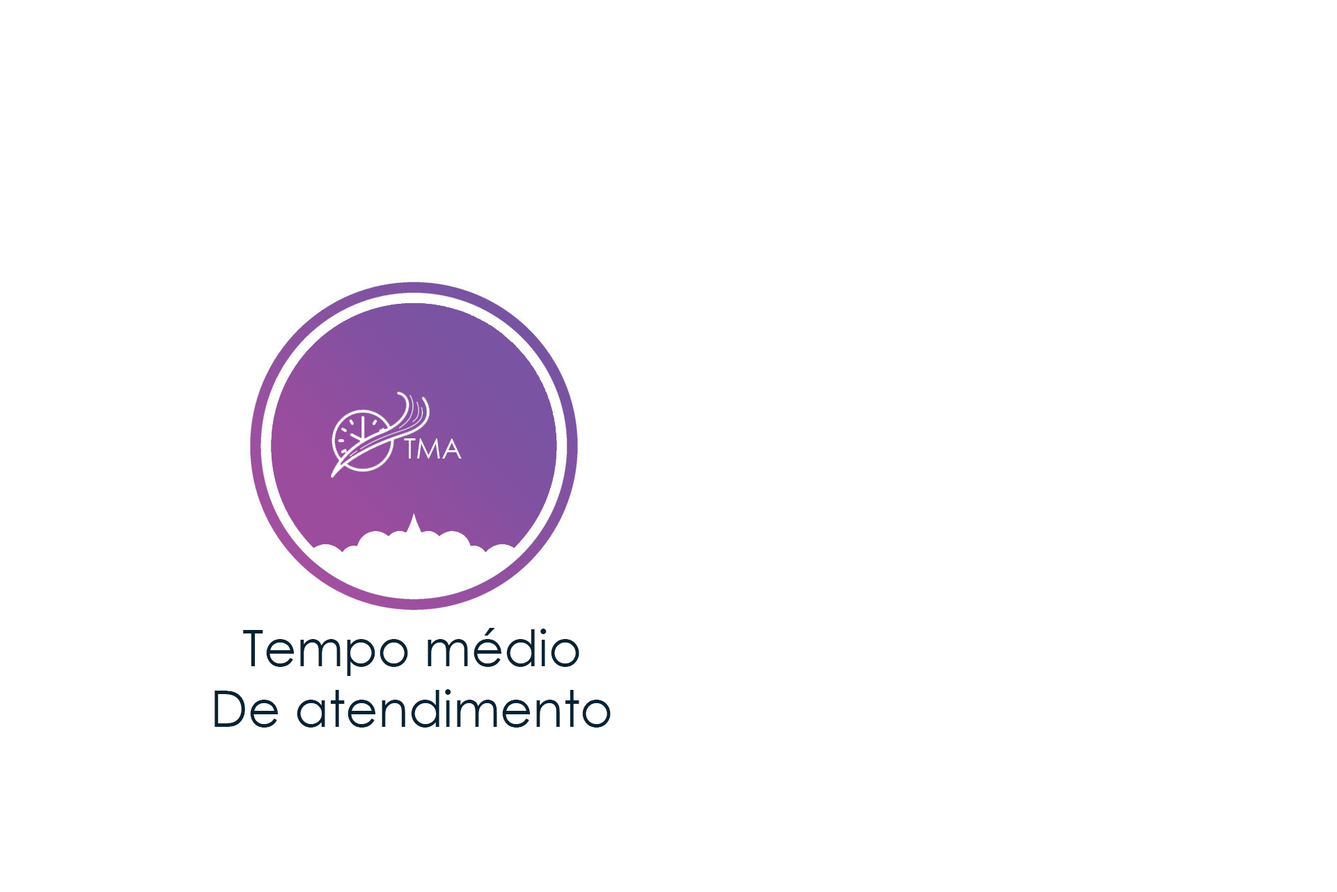
<style>
.page{position:relative;width:1337px;height:892px;background:#ffffff}
.page>*{position:absolute;margin:0}
.t1{font:27.9px "CenturyGothic";color:#ffffff}
.t2{font:50.2px "CenturyGothic";color:#072233}
</style>
<div class="page">
<p class="t1" style="left:404px;top:438px;width:58px;height:20px">TMA</p>
<p class="t2" style="left:215px;top:628px;width:396px;height:99px;text-align:center">Tempo médio<br>De atendimento</p>
</div>
